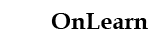
<style>
.page{position:relative;width:160px;height:40px;background:#ffffff}
.page>*{position:absolute;margin:0}
.t1{font:24px "BookAntiqua-Bold";color:#000000}
</style>
<div class="page">
<p class="t1" style="left:51px;top:13px;width:97px;height:16px">OnLearn</p>
</div>
